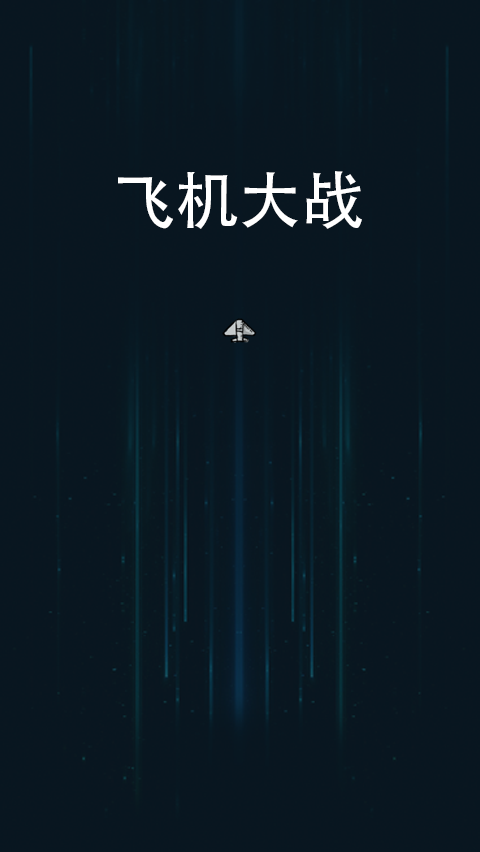
<style>
.page{position:relative;width:480px;height:852px;background:#091620}
.page>*{position:absolute;margin:0}
.t1{font:63px "AdobeHeitiStd-Regular";color:#ffffff}
</style>
<div class="page">
<p class="t1" style="left:118px;top:171px;width:244px;height:58px">飞机大战</p>
</div>
